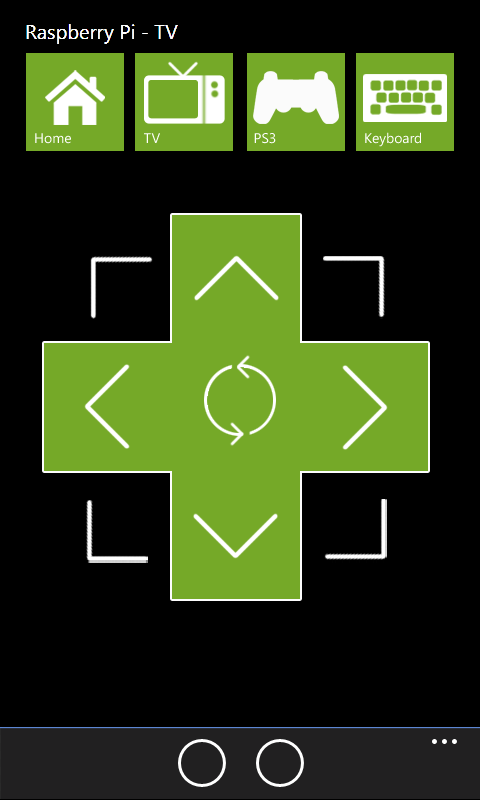
<style>
.page{position:relative;width:480px;height:800px;background:#000000}
.page>*{position:absolute;margin:0}
.t1{font:14px "SegoeWP";color:#ffffff}
</style>
<div class="page">
<p class="t1" style="left:35px;top:133px;width:36px;height:11px">Home</p>
<p class="t1" style="left:144px;top:133px;width:16px;height:10px">TV</p>
<p class="t1" style="left:254px;top:133px;width:22px;height:11px">PS3</p>
<p class="t1" style="left:365px;top:132px;width:56px;height:15px">Keyboard</p>
</div>
